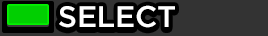
<style>
.page{position:relative;width:268px;height:36px;background:#333333}
.page>*{position:absolute;margin:0}
.t1{font:29.6px "Gotham-Medium";color:#ffffff}
</style>
<div class="page">
<p class="t1" style="left:59px;top:5px;width:116px;height:23px">SELECT</p>
</div>
